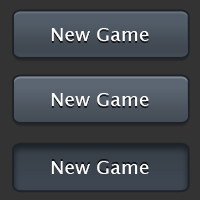
<style>
.page{position:relative;width:200px;height:200px;background:#333333}
.page>*{position:absolute;margin:0}
.t1{font:17.9px "LucidaSansUnicode";color:#ffffff;scale:1.08 1}
</style>
<div class="page">
<p class="t1" style="left:51px;top:28px;width:98px;height:13px">New Game</p>
<p class="t1" style="left:51px;top:93px;width:98px;height:13px">New Game</p>
<p class="t1" style="left:51px;top:161px;width:98px;height:13px">New Game</p>
</div>
